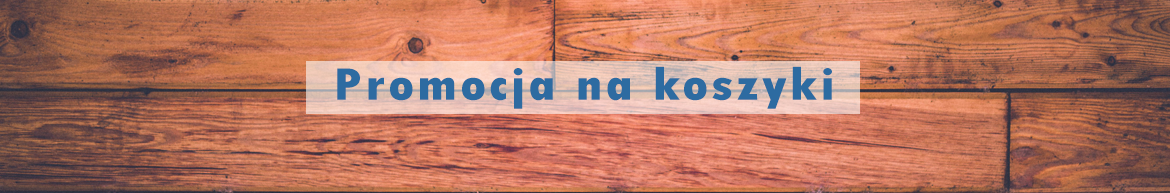
<style>
.page{position:relative;width:1170px;height:193px}
.page>*{position:absolute;margin:0}
.t1{font:48px "TwCenMT-CondensedExtraBold";letter-spacing:0.05em;color:#2d6ba1;scale:1.2 1}
</style>
<div class="page">
<p class="t1" style="left:337px;top:66px;width:495px;height:43px">Promocja na koszyki</p>
</div>
